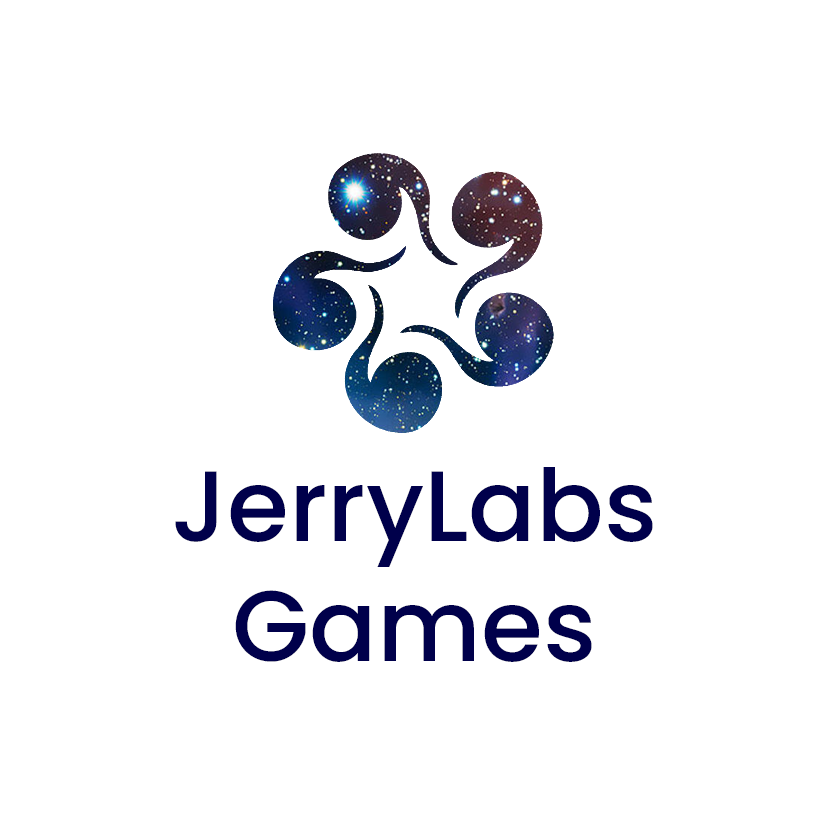
<style>
.page{position:relative;width:827px;height:827px;background:#ffffff}
.page>*{position:absolute;margin:0}
.t1{font:100px "Poppins-Medium";color:#00004b}
</style>
<div class="page">
<p class="t1" style="left:175px;top:467px;width:478px;height:195px;text-align:justify">JerryLabs<br>Games</p>
</div>
